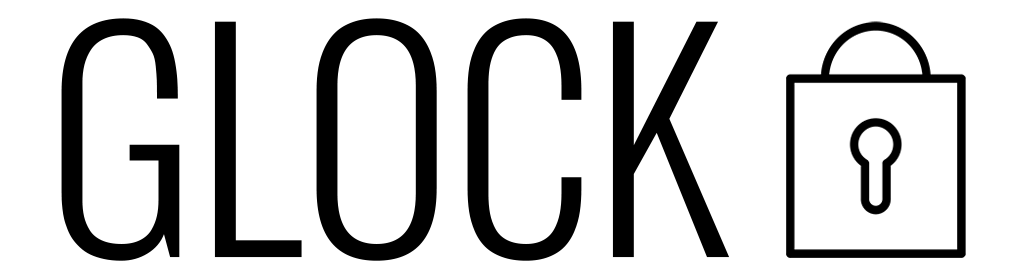
<style>
.page{position:relative;width:1024px;height:270px;background:#ffffff}
.page>*{position:absolute;margin:0}
.t1{font:280px "Oswald-Light";color:#000000}
</style>
<div class="page">
<p class="t1" style="left:61px;top:18px;width:669px;height:243px">GLOCK</p>
</div>
